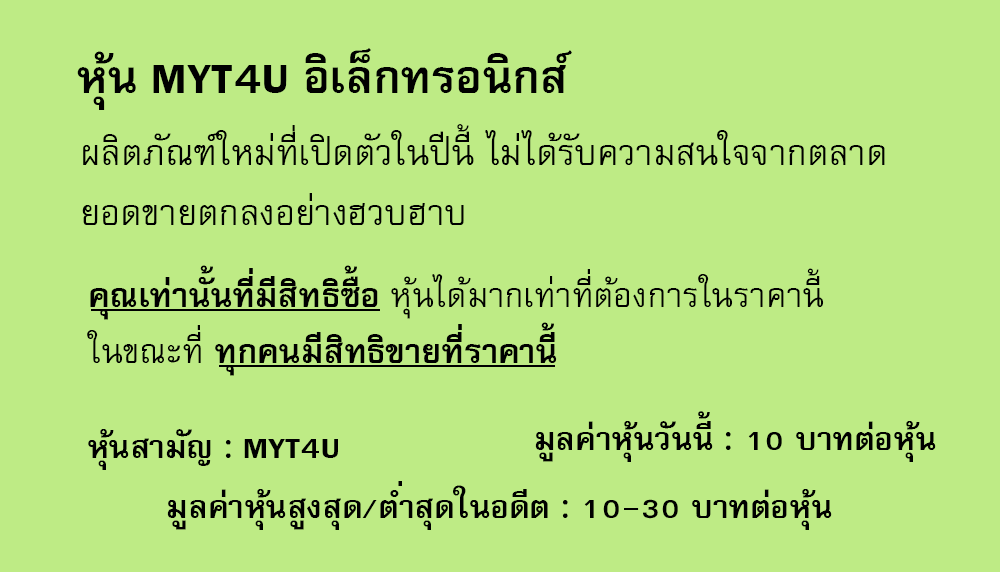
<style>
.page{position:relative;width:1000px;height:572px;background:#beeb85}
.page>*{position:absolute;margin:0}
.t1{font:64px "FreesiaUPCBold";color:#000000}
.t2{font:50px/60px "FreesiaUPC";color:#000000}
.t3{font:47px "FreesiaUPC";color:#000000}
.t4{font:47px "FreesiaUPCBold";color:#000000}
.t5{font:45px "FreesiaUPCBold";color:#000000}
</style>
<div class="page">
<p class="t1" style="left:77px;top:48px;width:495px;height:62px">หุ้น MYT4U อิเล็กทรอนิกส์</p>
<p class="t2" style="left:82px;top:124px;width:803px;height:101px">ผลิตภัณฑ์ใหม่ที่เปิดตัวในปีนี้ ไม่ได้รับความสนใจจากตลาด<br>ยอดขายตกลงอย่างฮวบฮาบ</p>
<p class="t3" style="left:87px;top:265px;width:737px;height:111px"><span class="t4">คุณเท่านั้นที่มีสิทธิซื้อ </span>หุ้นได้มากเท่าที่ต้องการในราคานี้<br>ในขณะที่<span class="t4"> ทุกคนมีสิทธิขายที่ราคานี้</span></p>
<p class="t5" style="left:535px;top:411px;width:401px;height:51px">มูลค่าหุ้นวันนี้ : 10 บาทต่อหุ้น</p>
<p class="t5" style="left:88px;top:429px;width:250px;height:41px">หุ้นสามัญ : MYT4U</p>
<p class="t5" style="left:167px;top:481px;width:665px;height:49px">มูลค่าหุ้นสูงสุด/ต่ำสุดในอดีต : 10-30 บาทต่อหุ้น</p>
</div>
